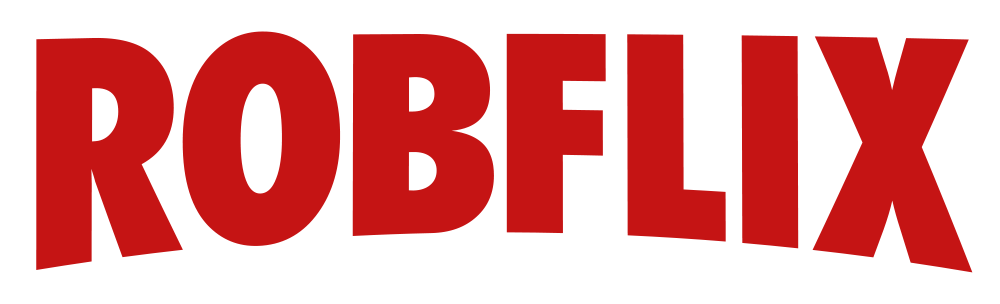
<style>
.page{position:relative;width:1000px;height:304px;background:#ffffff}
.page>*{position:absolute;margin:0}
.t1{font:308.7px "Futura-CondensedExtraBold";color:#c51414;scale:0.89 1}
.t2{font:308.7px "Futura-CondensedExtraBold";letter-spacing:-0.04em;color:#c51414;scale:0.89 1}
</style>
<div class="page">
<p class="t1" style="left:36px;top:31px;width:937px;height:242px"><span class="t2">ROB</span>FLIX</p>
</div>
